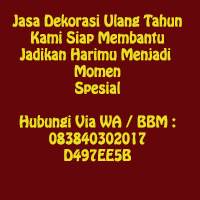
<style>
.page{position:relative;width:200px;height:200px;background:#65060b}
.page>*{position:absolute;margin:0}
.t1{font:14px "HoboStd";color:#e9de20}
</style>
<div class="page">
<p class="t1" style="left:12px;top:14px;width:170px;height:148px;text-align:center">Jasa Dekorasi Ulang Tahun<br>Kami Siap Membantu<br>Jadikan Harimu Menjadi <br>Momen<br>Spesial<br><br>Hubungi Via WA / BBM :<br>083840302017<br>D497EE5B</p>
</div>
